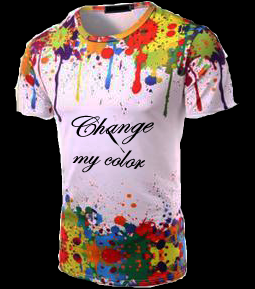
<style>
.page{position:relative;width:255px;height:289px;background:#000000}
.page>*{position:absolute;margin:0}
.t1{font:33.3px/33.3px "EdwardianScriptITC";color:#000000;font-style:italic;scale:0.92 1}
</style>
<div class="page">
<p class="t1" style="left:71px;top:115px;width:83px;height:58px">Change<br>my color</p>
</div>
